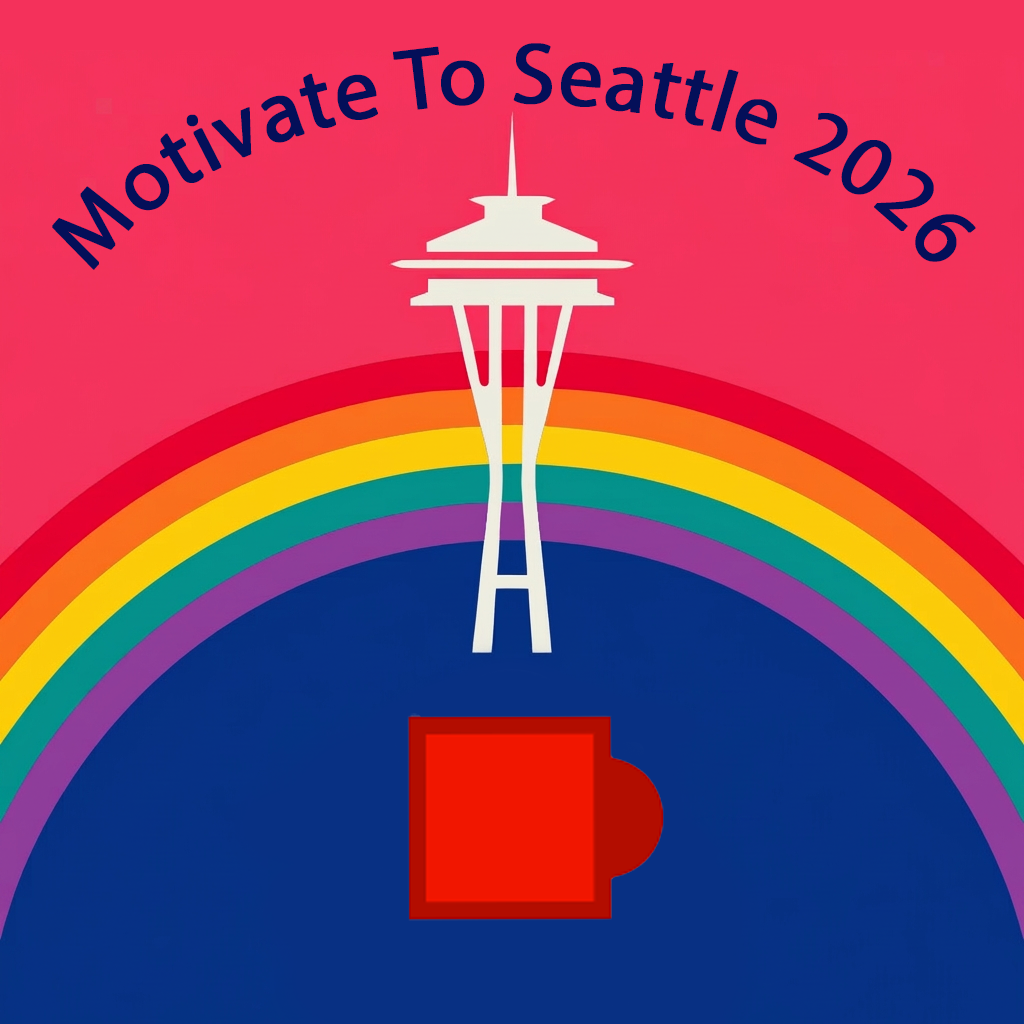
<style>
.page{position:relative;width:1024px;height:1024px}
.page>*{position:absolute;margin:0}
.t1{font:86.8px "MyriadPro-Regular";color:#040f59;font-weight:bold}
</style>
<div class="page">
<p class="t1" style="left:52px;top:43px;width:924px;height:227px;text-align:center">Motivate To Seattle 2026</p>
</div>
